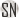
<style>
.page{position:relative;width:19px;height:19px}
.page>*{position:absolute;margin:0}
.t1{font:18.5px "AgencyFB-Reg";color:#393633}
</style>
<div class="page">
<p class="t1" style="left:2px;top:2px;width:14px;height:15px">SN</p>
</div>
